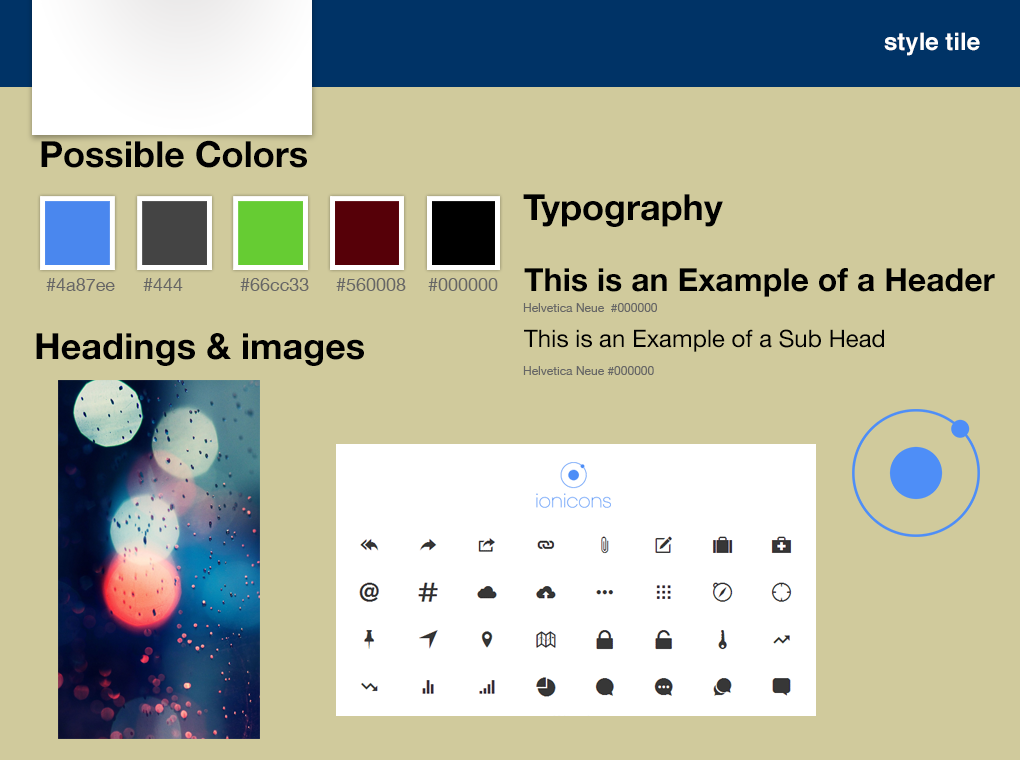
<style>
.page{position:relative;width:1020px;height:760px;background:#d0ca9c}
.page>*{position:absolute;margin:0}
.t1{font:24px "Helvetica-Bold";color:#ffffff}
.t2{font:36px "HelveticaNeue-Bold";color:#000000}
.t3{font:32px "HelveticaNeue-Bold";color:#000000}
.t4{font:18px "HelveticaNeue";color:#666666}
.t5{font:12px "HelveticaNeue";color:#666666}
.t6{font:24px "HelveticaNeue";color:#000000}
</style>
<div class="page">
<p class="t1" style="left:884px;top:32px;width:96px;height:24px">style tile</p>
<p class="t2" style="left:41px;top:140px;width:266px;height:28px">Possible Colors</p>
<p class="t2" style="left:523px;top:194px;width:200px;height:33px">Typography</p>
<p class="t3" style="left:524px;top:268px;width:471px;height:29px">This is an Example of a Header</p>
<p class="t4" style="left:46px;top:278px;width:69px;height:13px">#4a87ee</p>
<p class="t4" style="left:143px;top:278px;width:40px;height:13px">#444</p>
<p class="t4" style="left:240px;top:278px;width:69px;height:13px">#66cc33</p>
<p class="t4" style="left:336px;top:278px;width:70px;height:13px">#560008</p>
<p class="t4" style="left:428px;top:278px;width:70px;height:13px">#000000</p>
<p class="t5" style="left:523px;top:303px;width:134px;height:9px">Helvetica Neue  #000000</p>
<p class="t6" style="left:524px;top:329px;width:360px;height:23px">This is an Example of a Sub Head</p>
<p class="t2" style="left:36px;top:333px;width:328px;height:33px">Headings &amp; images</p>
<p class="t5" style="left:523px;top:366px;width:131px;height:9px">Helvetica Neue #000000</p>
</div>
